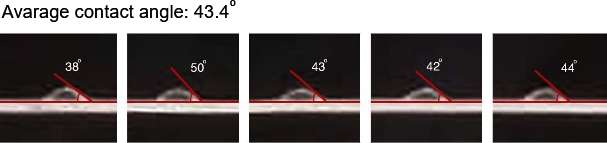
<style>
.page{position:relative;width:607px;height:143px;background:#ffffff}
.page>*{position:absolute;margin:0}
.t1{font:18.3px "ArialMT";color:#000000}
</style>
<div class="page">
<p class="t1" style="left:1px;top:0px;width:235px;height:22px">Avarage contact angle: 43.4o</p>
</div>
